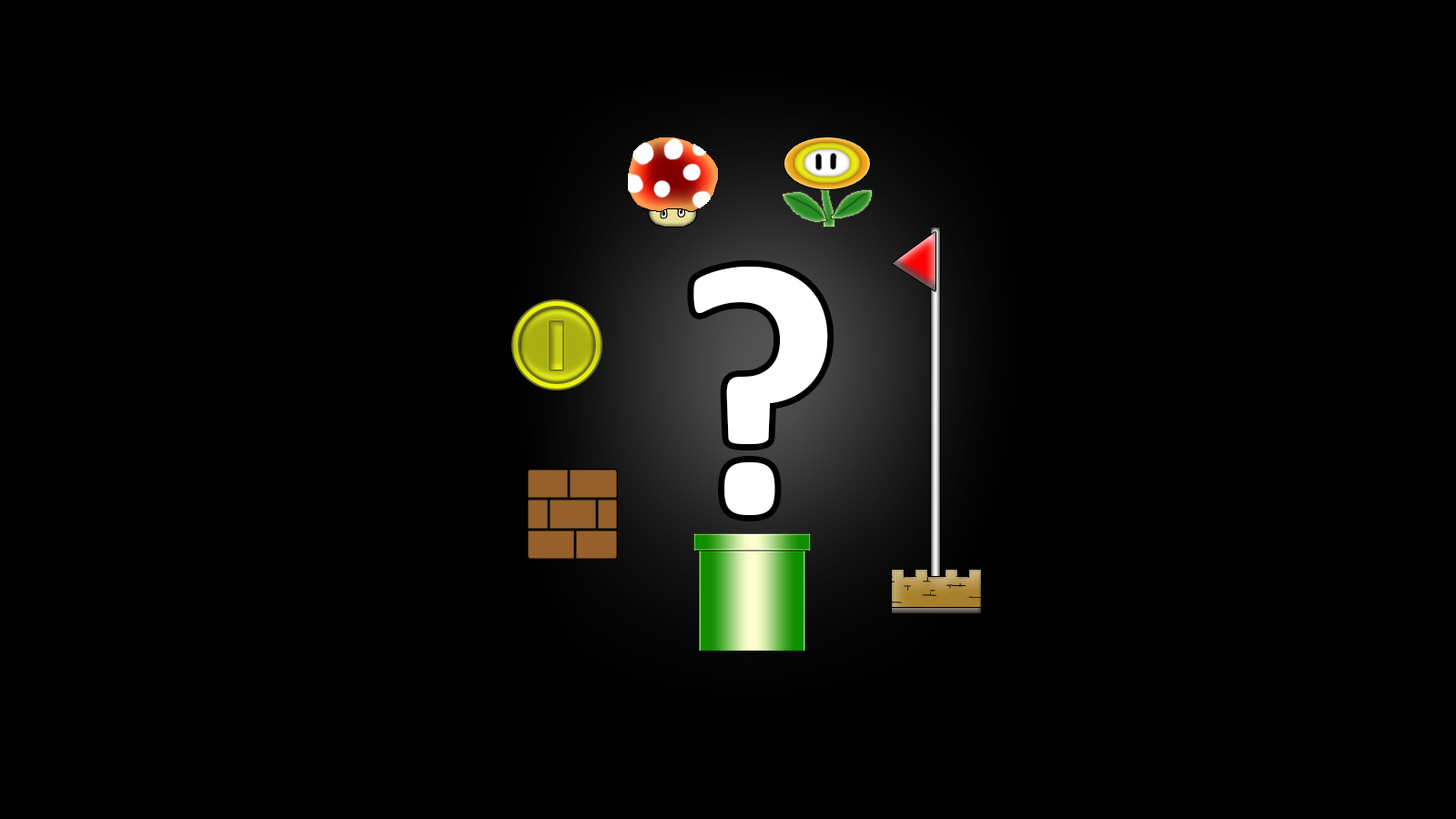
<style>
.page{position:relative;width:1456px;height:819px;background:#000000}
.page>*{position:absolute;margin:0}
.t1{font:364px "Calibri-Bold";color:#ffffff}
</style>
<div class="page">
<p class="t1" style="left:693px;top:267px;width:135px;height:248px">?</p>
</div>
